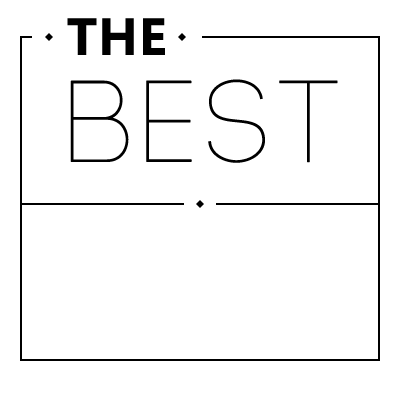
<style>
.page{position:relative;width:400px;height:400px;background:#ffffff}
.page>*{position:absolute;margin:0}
.t1{font:48px "MicrosoftYaHei-Bold";color:#000000;font-weight:bold}
.t2{font:115.2px "Code-Light";letter-spacing:0.065em;color:#000000;font-weight:bold}
</style>
<div class="page">
<p class="t1" style="left:67px;top:18px;width:98px;height:37px">THE</p>
<p class="t2" style="left:70px;top:79px;width:268px;height:84px">BEST</p>
</div>
